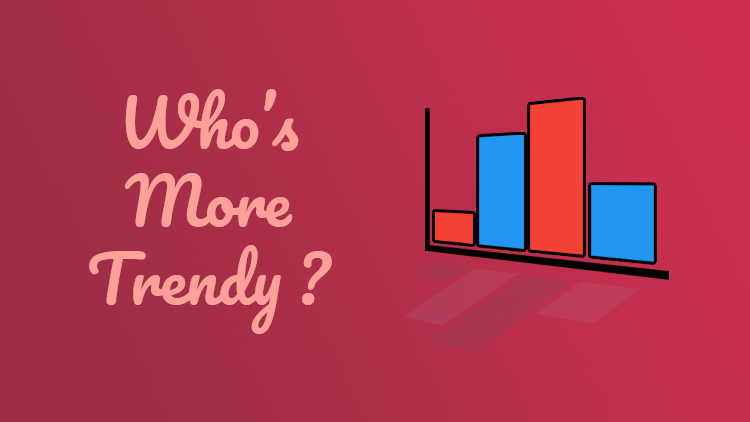
<style>
.page{position:relative;width:750px;height:422px}
.page>*{position:absolute;margin:0}
.t1{font:65.2px "Pacifico-Regular";color:#ffa099}
</style>
<div class="page">
<p class="t1" style="left:89px;top:89px;width:243px;height:245px;text-align:center">Who’s<br>More<br>Trendy ?</p>
</div>
